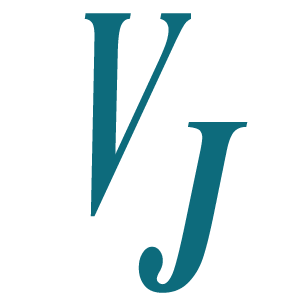
<style>
.page{position:relative;width:300px;height:300px;background:#ffffff}
.page>*{position:absolute;margin:0}
.t1{font:371.6px "Vijaya-Bold";color:#0d6b7c;font-variant:small-caps;scale:0.54 1}
.t2{font:446.5px "Vijaya-Bold";color:#0d6b7c;font-variant:small-caps;scale:0.71 1}
</style>
<div class="page">
<p class="t1" style="left:84px;top:13px;width:107px;height:204px">V</p>
<p class="t2" style="left:138px;top:122px;width:110px;height:171px">j</p>
</div>
